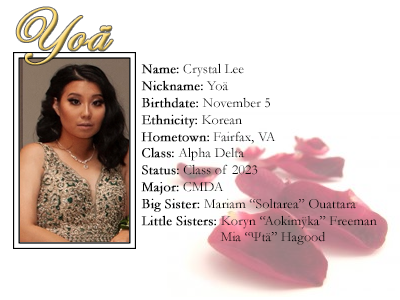
<style>
.page{position:relative;width:400px;height:300px;background:#ffffff}
.page>*{position:absolute;margin:0}
.t1{font:60px "EdwardianScriptITC";font-weight:bold}
.t2{font:14px "Garamond";color:#000000}
.t3{font:14px "Garamond";color:#000000;font-weight:bold}
</style>
<div class="page">
<p class="t1" style="left:16px;top:7px;width:97px;height:58px">Yoä</p>
<p class="t2" style="left:141px;top:63px;width:236px;height:182px"><span class="t3">Name:</span> Crystal Lee<br><span class="t3">Nickname:</span> Yoä<br><span class="t3">Birthdate:</span> November 5<br><span class="t3">Ethnicity:</span> Korean<br><span class="t3">Hometown:</span> Fairfax, VA<br><span class="t3">Class:</span> Alpha Delta<br><span class="t3">Status:</span> Class of 2023<br><span class="t3">Major:</span> CMDA<br><span class="t3">Big Sister: </span>Mariam “Soltarea” Ouattara<br><span class="t3">Little Sisters: </span>Koryn “Aokimÿka” Freeman<br>    Mia “Ψtä” Hagood</p>
</div>
